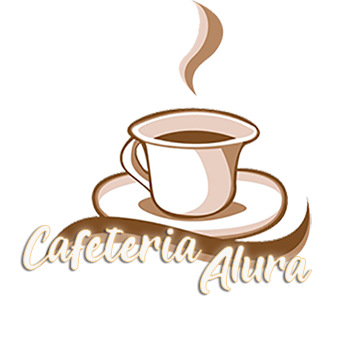
<style>
.page{position:relative;width:350px;height:350px;background:#ffffff}
.page>*{position:absolute;margin:0}
.t1{font:64px "Roulette"}
</style>
<div class="page">
<p class="t1" style="left:23px;top:225px;width:180px;height:45px">Cafeteria</p>
<p class="t1" style="left:200px;top:245px;width:113px;height:49px">Alura</p>
</div>
